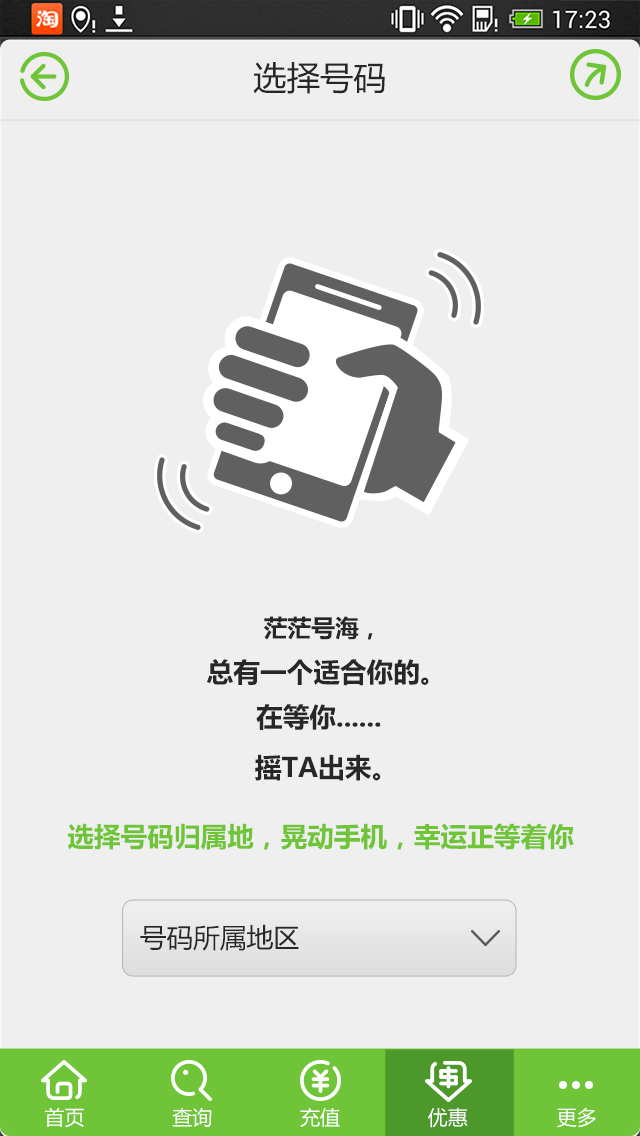
<style>
.page{position:relative;width:640px;height:1136px;background:#efefef}
.page>*{position:absolute;margin:0}
.t1{font:33.3px "MicrosoftYaHei";color:#272727}
.t2{font:23.7px "MicrosoftYaHei-Bold";color:#272727}
.t3{font:26.7px "MicrosoftYaHei-Bold";color:#272727}
.t4{font:26.7px "MicrosoftYaHei-Bold";color:#6fc537}
.t5{font:26.7px "MicrosoftYaHei";color:#272727}
.t6{font:20px "MicrosoftYaHei";color:#ffffff}
</style>
<div class="page">
<p class="t1" style="left:253px;top:62px;width:132px;height:32px">选择号码</p>
<p class="t2" style="left:264px;top:616px;width:109px;height:24px">茫茫号海，</p>
<p class="t3" style="left:207px;top:659px;width:222px;height:27px">总有一个适合你的。</p>
<p class="t3" style="left:256px;top:704px;width:125px;height:26px">在等你......</p>
<p class="t3" style="left:255px;top:754px;width:126px;height:27px">摇TA出来。</p>
<p class="t4" style="left:68px;top:823px;width:506px;height:27px">选择号码归属地，晃动手机，幸运正等着你</p>
<p class="t5" style="left:140px;top:924px;width:159px;height:27px">号码所属地区</p>
<p class="t6" style="left:45px;top:1107px;width:39px;height:21px">首页</p>
<p class="t6" style="left:172px;top:1107px;width:40px;height:20px">查询</p>
<p class="t6" style="left:300px;top:1107px;width:40px;height:20px">充值</p>
<p class="t6" style="left:428px;top:1107px;width:40px;height:21px">优惠</p>
<p class="t6" style="left:557px;top:1108px;width:39px;height:20px">更多</p>
</div>
